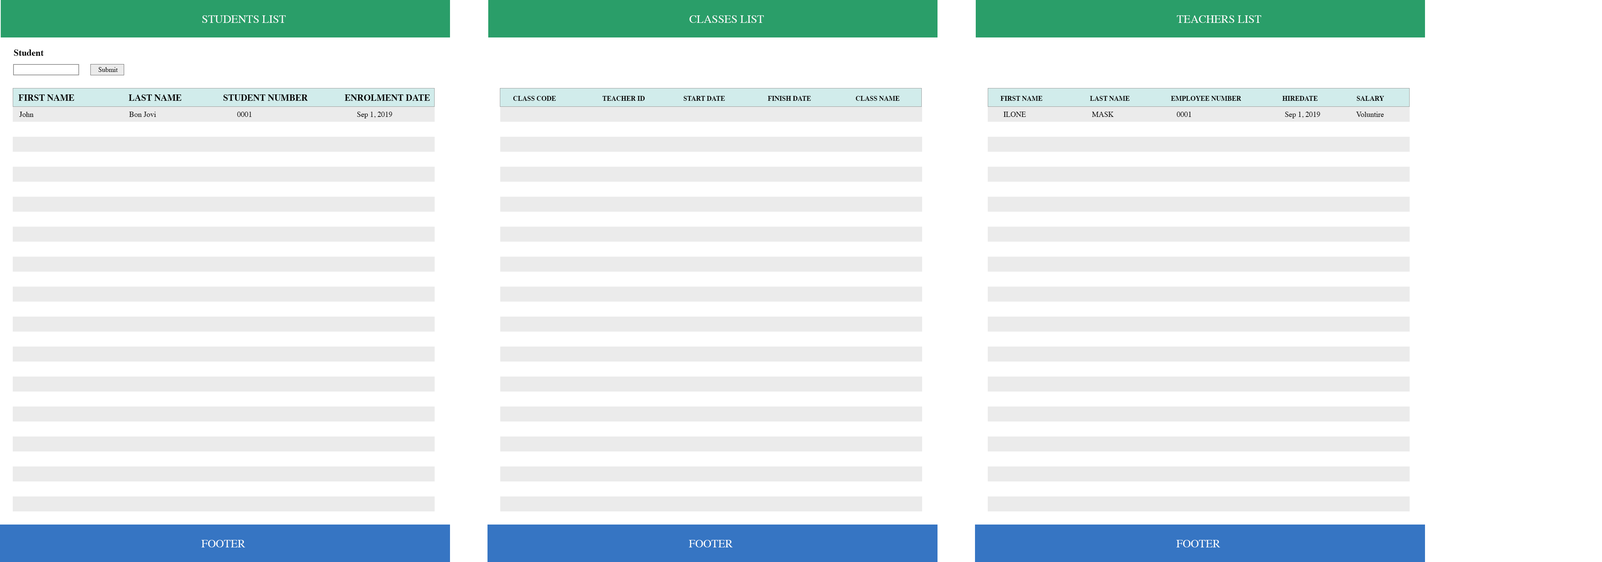
<style>
.page{position:relative;width:1602px;height:562px;background:#ffffff}
.page>*{position:absolute;margin:0}
.t1{font:11.2px "Times-Roman";color:#fbfcfc}
.t2{font:9px "Times-Bold";color:#070707}
.t3{font:6.8px "Times-Roman";color:#060606}
.t4{font:6.8px "Times-Bold";color:#070707}
.t5{font:7.5px "Times-Roman";color:#070707}
</style>
<div class="page">
<p class="t1" style="left:202px;top:15px;width:84px;height:8px">STUDENTS LIST</p>
<p class="t1" style="left:689px;top:15px;width:75px;height:8px">CLASSES LIST</p>
<p class="t1" style="left:1177px;top:15px;width:85px;height:8px">TEACHERS LIST</p>
<p class="t2" style="left:14px;top:50px;width:30px;height:6px">Student</p>
<p class="t3" style="left:98px;top:67px;width:20px;height:5px">Submit</p>
<p class="t2" style="left:18px;top:94px;width:412px;height:7px">FIRST NAME     LAST NAME    STUDENT NUMBER    ENROLMENT DATE</p>
<p class="t4" style="left:513px;top:96px;width:387px;height:5px">CLASS CODE        TEACHER ID         START DATE          FINISH DATE      CLASS NAME</p>
<p class="t4" style="left:1000px;top:96px;width:384px;height:5px">FIRST NAME        LAST NAME         EMPLOYEE NUMBER          HIREDATE      SALARY</p>
<p class="t5" style="left:19px;top:112px;width:373px;height:6px">John        Bon Jovi       0001        Sep 1, 2019</p>
<p class="t5" style="left:1004px;top:112px;width:380px;height:6px">ILONE          MASK          0001             Sep 1, 2019      Voluntire</p>
<p class="t1" style="left:201px;top:540px;width:44px;height:8px">FOOTER</p>
<p class="t1" style="left:689px;top:540px;width:44px;height:8px">FOOTER</p>
<p class="t1" style="left:1176px;top:540px;width:44px;height:8px">FOOTER</p>
</div>
